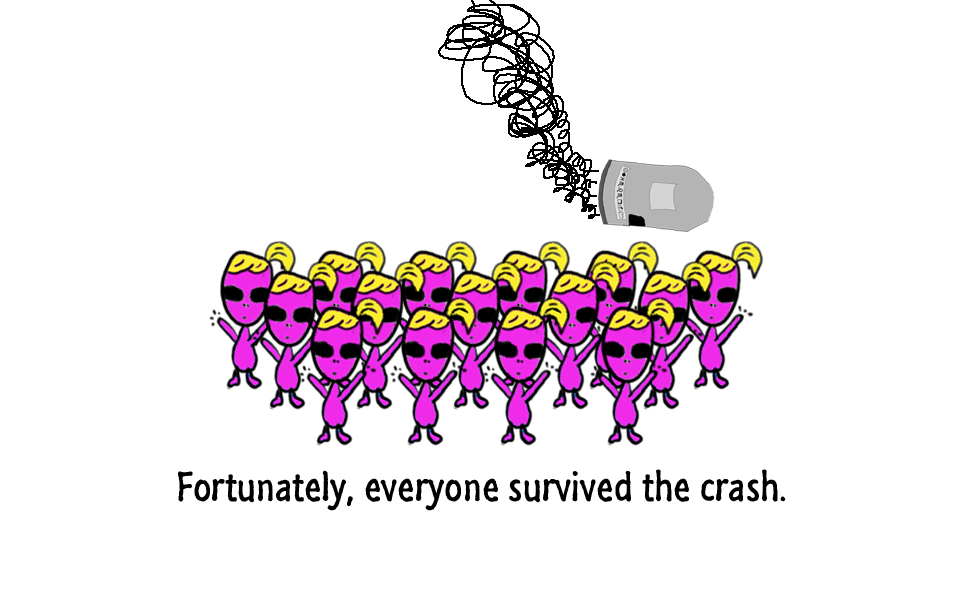
<style>
.page{position:relative;width:960px;height:600px;background:#ffffff}
.page>*{position:absolute;margin:0}
.t1{font:42px "SegoeMarker";color:#000000}
</style>
<div class="page">
<p class="t1" style="left:178px;top:469px;width:608px;height:42px">Fortunately, everyone survived the crash.</p>
</div>
